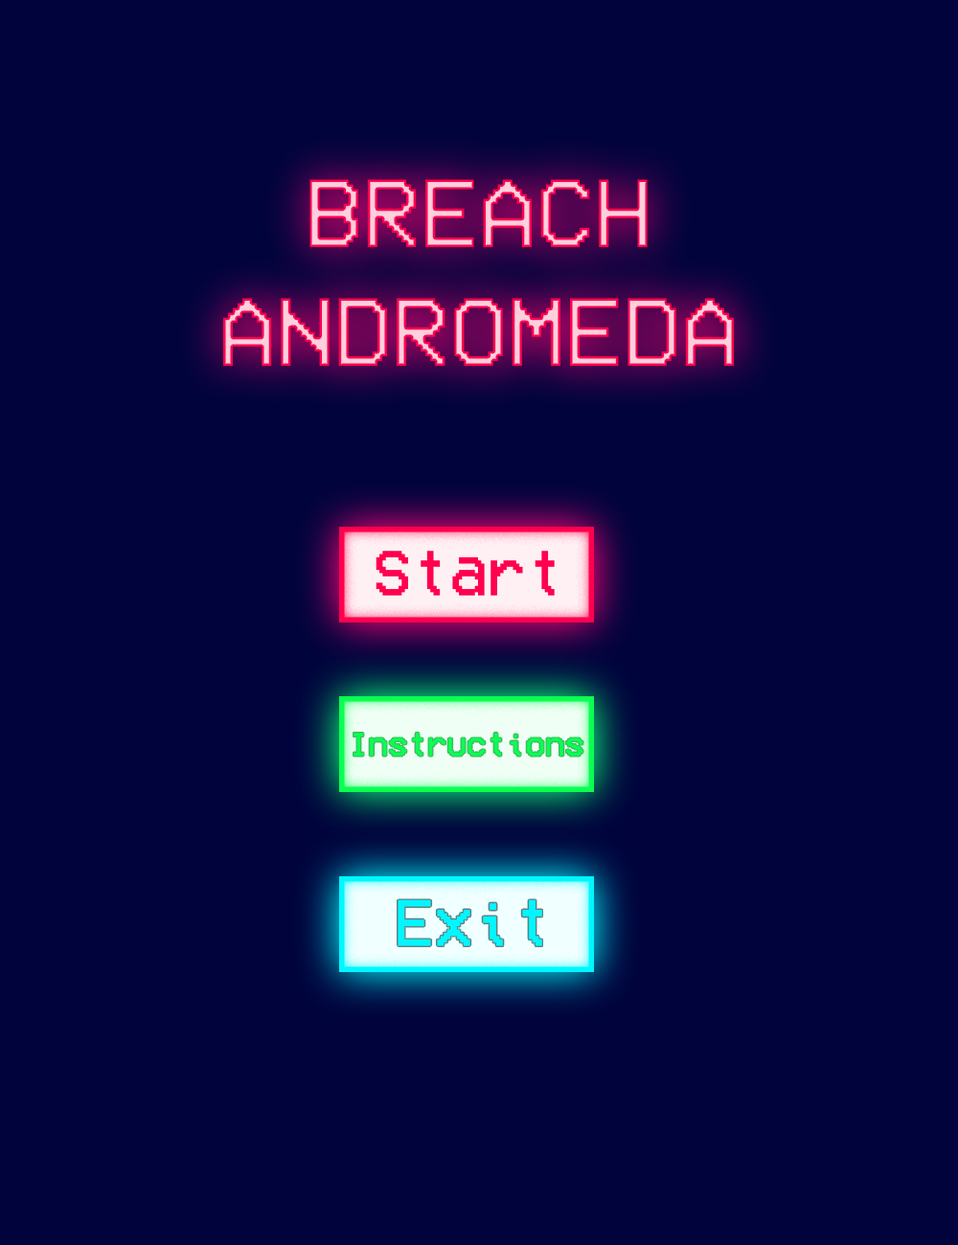
<style>
.page{position:relative;width:958px;height:1245px;background:#00033c}
.page>*{position:absolute;margin:0}
.t1{font:98.6px "VCROSDMono"}
.t2{font:65.1px "VCROSDMono";color:#ff004e}
.t3{font:33.5px "VCROSDMono";color:#0aff52}
.t4{font:67px "VCROSDMono";color:#00f7ff}
</style>
<div class="page">
<p class="t1" style="left:222px;top:179px;width:513px;height:187px;text-align:center">BREACH ANDROMEDA</p>
<p class="t2" style="left:375px;top:551px;width:180px;height:45px">Start</p>
<p class="t3" style="left:353px;top:733px;width:230px;height:24px">Instructions</p>
<p class="t4" style="left:397px;top:899px;width:145px;height:47px">Exit</p>
</div>
